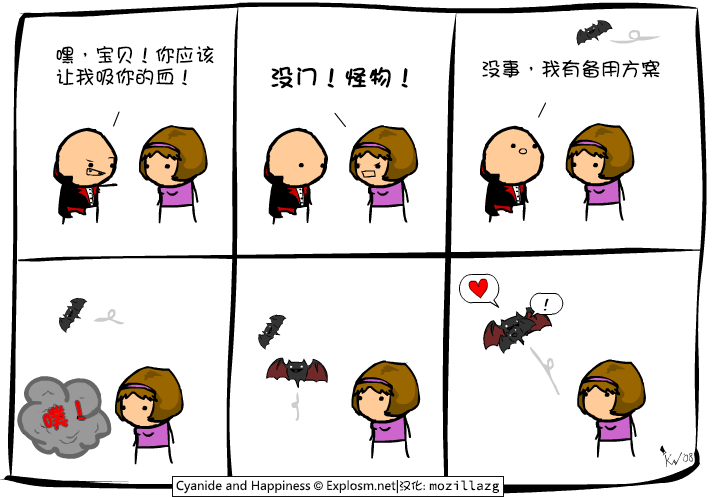
<style>
.page{position:relative;width:718px;height:497px;background:#ffffff}
.page>*{position:absolute;margin:0}
.t1{font:20px/22px "DFGirl";color:#000000}
.t2{font:20px "DFGirl";color:#000000}
.t3{font:24px "DFGirl";color:#000000;font-weight:bold}
.t4{font:25px "DFGirl";color:#ff0000;font-weight:bold}
</style>
<div class="page">
<p class="t1" style="left:56px;top:46px;width:158px;height:40px">嘿，宝贝！你应该<br>让我吸你的血！</p>
<p class="t2" style="left:482px;top:59px;width:178px;height:19px">没事，我有备用方案</p>
<p class="t3" style="left:271px;top:66px;width:137px;height:23px">没门！怪物！</p>
<p class="t4" style="left:43px;top:400px;width:42px;height:30px;rotate:-19deg">噗！</p>
</div>
